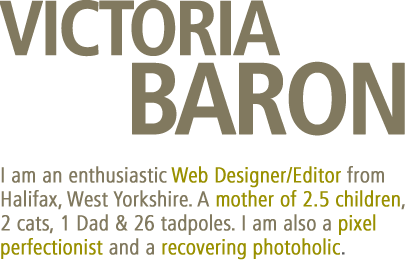
<style>
.page{position:relative;width:405px;height:268px;background:#ffffff}
.page>*{position:absolute;margin:0}
.t1{font:77.3px "FrutigerLTStd-BoldCn";letter-spacing:-0.07em;color:#81795f;text-transform:uppercase;font-weight:bold}
.t2{font:101.3px "FrutigerLTStd-BoldCn";letter-spacing:-0.068em;color:#81795f;text-transform:uppercase;font-weight:bold}
.t3{font:21.3px/24px "FrutigerLTStd-LightCn";color:#81795f;font-weight:bold}
.t4{font:21.3px/24px "FrutigerLTStd-LightCn";color:#999000;font-weight:bold}
.t5{font:21.3px/24px "FrutigerLTStd-LightCn";color:#5c5c5c;font-weight:bold}
</style>
<div class="page">
<p class="t1" style="left:0px;top:0px;width:280px;height:57px">Victoria</p>
<p class="t2" style="left:132px;top:61px;width:273px;height:75px">Baron</p>
<p class="t3" style="left:1px;top:166px;width:404px;height:94px">I am an enthusiastic <span class="t4">Web Designer/Editor </span>from Halifax, West Yorkshire. A <span class="t4">mother of 2.5 children</span>, 2 cats, 1 Dad &amp; 26 tadpoles. I am also a <span class="t4">pixel perfectionist </span>and a <span class="t4">recovering photoholic</span><span class="t5">.</span></p>
</div>
